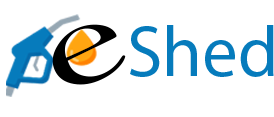
<style>
.page{position:relative;width:274px;height:117px;background:#ffffff}
.page>*{position:absolute;margin:0}
.t1{font:131.6px "BellMT";color:#000000;scale:1.47 1}
.t2{font:72px "MyriadPro-Regular";color:#067bbc}
</style>
<div class="page">
<p class="t1" style="left:52px;top:24px;width:74px;height:61px;rotate:-25deg">e</p>
<p class="t2" style="left:130px;top:25px;width:144px;height:52px">Shed</p>
</div>
